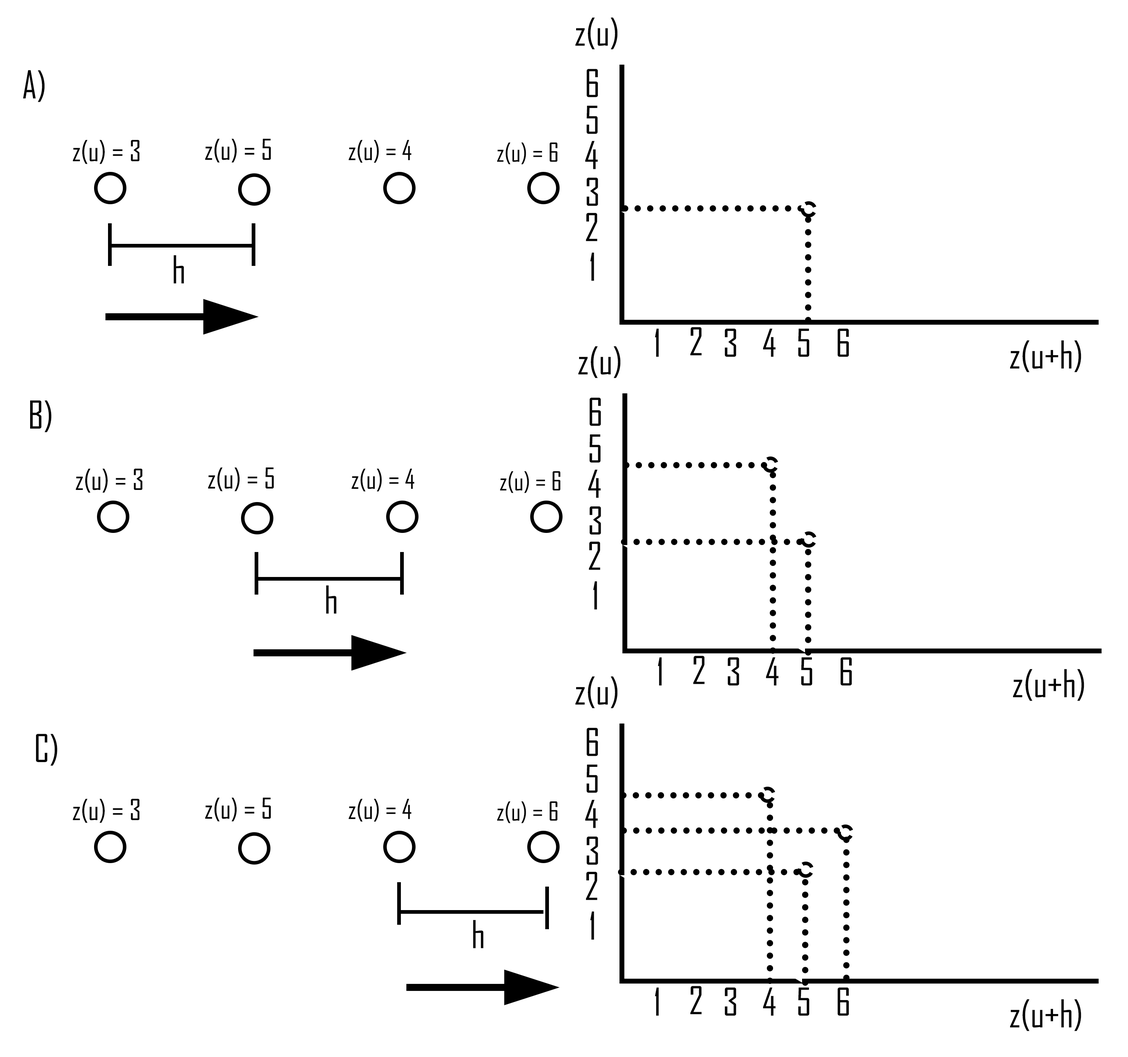
<style>
.page{position:relative;width:1128px;height:1057px;background:#ffffff}
.page>*{position:absolute;margin:0}
.t1{font:36.7px "AgencyFB-Reg";color:#040404}
.t2{font:27.8px "AgencyFB-Reg";color:#040404}
.t3{font:27.6px "AgencyFB-Reg";color:#040404}
.t4{font:26.2px "AgencyFB-Reg";color:#040404}
.t5{font:25.2px "AgencyFB-Reg";color:#040404}
</style>
<div class="page">
<p class="t1" style="left:575px;top:17px;width:43px;height:33px">z(u)</p>
<p class="t1" style="left:23px;top:70px;width:22px;height:32px">A)</p>
<p class="t1" style="left:586px;top:69px;width:12px;height:28px">6</p>
<p class="t1" style="left:586px;top:105px;width:12px;height:29px">5</p>
<p class="t2" style="left:73px;top:140px;width:67px;height:24px">z(u) = 3</p>
<p class="t3" style="left:205px;top:138px;width:66px;height:25px">z(u) = 5</p>
<p class="t4" style="left:349px;top:140px;width:62px;height:23px">z(u) = 4</p>
<p class="t5" style="left:497px;top:143px;width:60px;height:22px">z(u) = 6</p>
<p class="t1" style="left:585px;top:141px;width:13px;height:28px">4</p>
<p class="t1" style="left:586px;top:177px;width:12px;height:29px">3</p>
<p class="t1" style="left:586px;top:213px;width:11px;height:28px">2</p>
<p class="t1" style="left:173px;top:255px;width:11px;height:29px">h</p>
<p class="t1" style="left:590px;top:252px;width:4px;height:29px">1</p>
<p class="t1" style="left:655px;top:328px;width:4px;height:29px">1</p>
<p class="t1" style="left:690px;top:327px;width:12px;height:29px">2</p>
<p class="t1" style="left:724px;top:328px;width:12px;height:29px">3</p>
<p class="t1" style="left:763px;top:328px;width:13px;height:29px">4</p>
<p class="t1" style="left:798px;top:328px;width:11px;height:29px">5</p>
<p class="t1" style="left:837px;top:328px;width:12px;height:29px">6</p>
<p class="t1" style="left:1010px;top:340px;width:71px;height:33px">z(u+h)</p>
<p class="t1" style="left:578px;top:346px;width:42px;height:32px">z(u)</p>
<p class="t1" style="left:30px;top:400px;width:21px;height:32px">B)</p>
<p class="t1" style="left:589px;top:397px;width:12px;height:29px">6</p>
<p class="t1" style="left:589px;top:434px;width:12px;height:29px">5</p>
<p class="t2" style="left:76px;top:469px;width:67px;height:24px">z(u) = 3</p>
<p class="t3" style="left:208px;top:467px;width:66px;height:25px">z(u) = 5</p>
<p class="t4" style="left:352px;top:469px;width:62px;height:23px">z(u) = 4</p>
<p class="t5" style="left:500px;top:471px;width:60px;height:22px">z(u) = 6</p>
<p class="t1" style="left:588px;top:469px;width:13px;height:29px">4</p>
<p class="t1" style="left:589px;top:506px;width:12px;height:29px">3</p>
<p class="t1" style="left:589px;top:542px;width:11px;height:28px">2</p>
<p class="t1" style="left:593px;top:581px;width:4px;height:29px">1</p>
<p class="t1" style="left:326px;top:586px;width:11px;height:28px">h</p>
<p class="t1" style="left:658px;top:657px;width:4px;height:29px">1</p>
<p class="t1" style="left:693px;top:656px;width:12px;height:28px">2</p>
<p class="t1" style="left:727px;top:657px;width:12px;height:29px">3</p>
<p class="t1" style="left:766px;top:657px;width:12px;height:29px">4</p>
<p class="t1" style="left:801px;top:657px;width:11px;height:29px">5</p>
<p class="t1" style="left:840px;top:657px;width:12px;height:29px">6</p>
<p class="t1" style="left:575px;top:676px;width:43px;height:33px">z(u)</p>
<p class="t1" style="left:1013px;top:669px;width:71px;height:32px">z(u+h)</p>
<p class="t1" style="left:36px;top:734px;width:21px;height:32px">C)</p>
<p class="t1" style="left:586px;top:728px;width:12px;height:28px">6</p>
<p class="t1" style="left:586px;top:764px;width:12px;height:29px">5</p>
<p class="t3" style="left:205px;top:798px;width:66px;height:24px">z(u) = 5</p>
<p class="t2" style="left:73px;top:799px;width:67px;height:24px">z(u) = 3</p>
<p class="t4" style="left:349px;top:799px;width:62px;height:23px">z(u) = 4</p>
<p class="t5" style="left:497px;top:802px;width:60px;height:22px">z(u) = 6</p>
<p class="t1" style="left:585px;top:800px;width:13px;height:28px">4</p>
<p class="t1" style="left:586px;top:836px;width:12px;height:29px">3</p>
<p class="t1" style="left:586px;top:872px;width:11px;height:28px">2</p>
<p class="t1" style="left:590px;top:911px;width:4px;height:29px">1</p>
<p class="t1" style="left:473px;top:920px;width:10px;height:29px">h</p>
<p class="t1" style="left:655px;top:987px;width:4px;height:29px">1</p>
<p class="t1" style="left:690px;top:986px;width:12px;height:29px">2</p>
<p class="t1" style="left:724px;top:987px;width:12px;height:29px">3</p>
<p class="t1" style="left:763px;top:987px;width:13px;height:29px">4</p>
<p class="t1" style="left:798px;top:987px;width:11px;height:29px">5</p>
<p class="t1" style="left:837px;top:987px;width:12px;height:29px">6</p>
<p class="t1" style="left:1010px;top:999px;width:71px;height:33px">z(u+h)</p>
</div>
